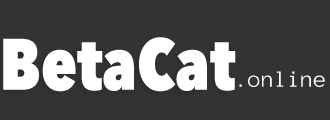
<style>
.page{position:relative;width:330px;height:120px;background:#333333}
.page>*{position:absolute;margin:0}
.t1{font:72px "AvenirNextCondensed-Heavy";color:#ffffff}
.t2{font:24px "AnonymicePowerline";color:#ffffff}
</style>
<div class="page">
<p class="t1" style="left:3px;top:37px;width:233px;height:55px">BetaCat</p>
<p class="t2" style="left:239px;top:71px;width:86px;height:16px">.online</p>
</div>
